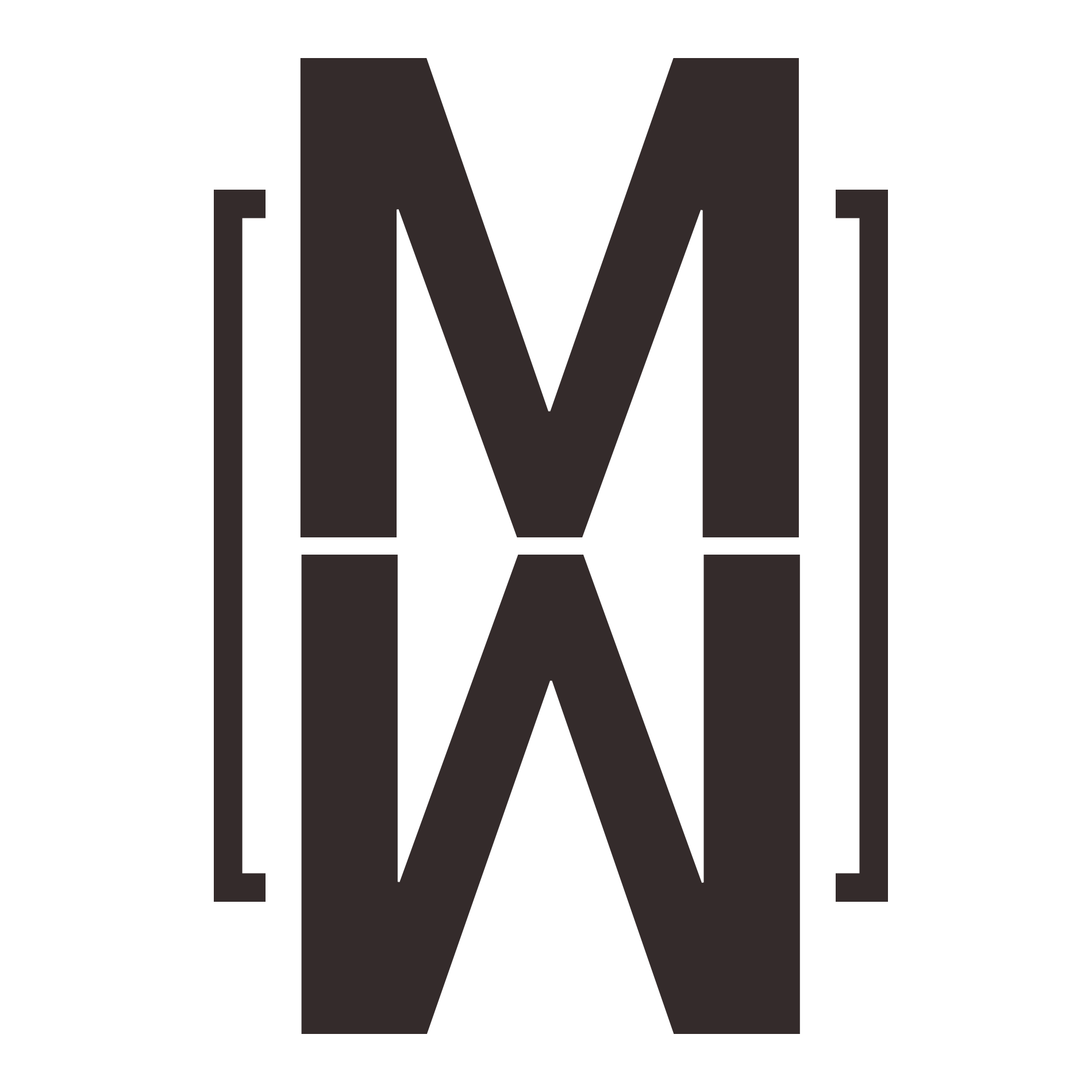
<style>
.page{position:relative;width:1092px;height:1092px;background:#ffffff}
.page>*{position:absolute;margin:0}
.t1{font:674.2px "Roboto-Bold";color:#342b2b}
</style>
<div class="page">
<p class="t1" style="left:300px;top:58px;width:499px;height:479px">M</p>
<p class="t1" style="left:301px;top:555px;width:499px;height:479px;rotate:180deg">M</p>
</div>
